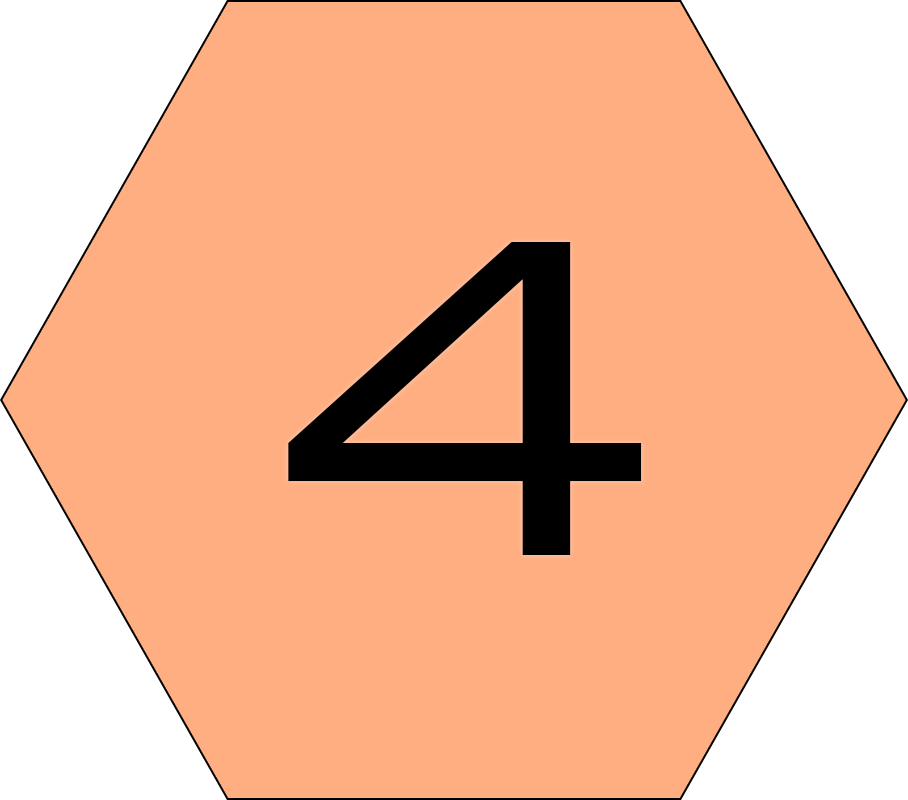
<style>
.page{position:relative;width:908px;height:800px;background:#ffae82}
.page>*{position:absolute;margin:0}
.t1{font:600px "BankGothicBT-Light";color:#000000}
</style>
<div class="page">
<p class="t1" style="left:288px;top:242px;width:354px;height:313px">4</p>
</div>
